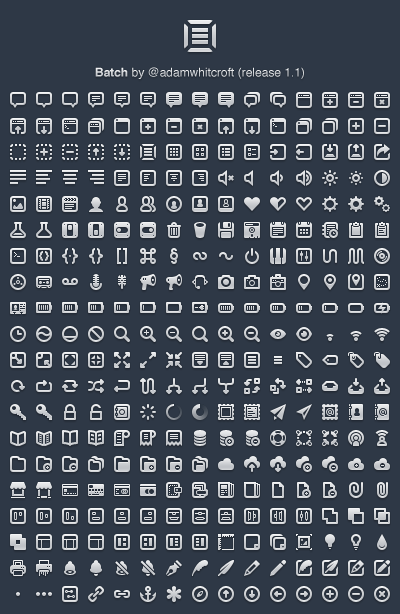
<style>
.page{position:relative;width:400px;height:614px;background:#2e3846}
.page>*{position:absolute;margin:0}
.t1{font:12px "Helvetica";color:#dddfe1}
.t2{font:12px "Helvetica-Bold";color:#dddfe1}
</style>
<div class="page">
<p class="t1" style="left:95px;top:67px;width:209px;height:12px"><span class="t2">Batch</span> by @adamwhitcroft (release 1.1)</p>
</div>
